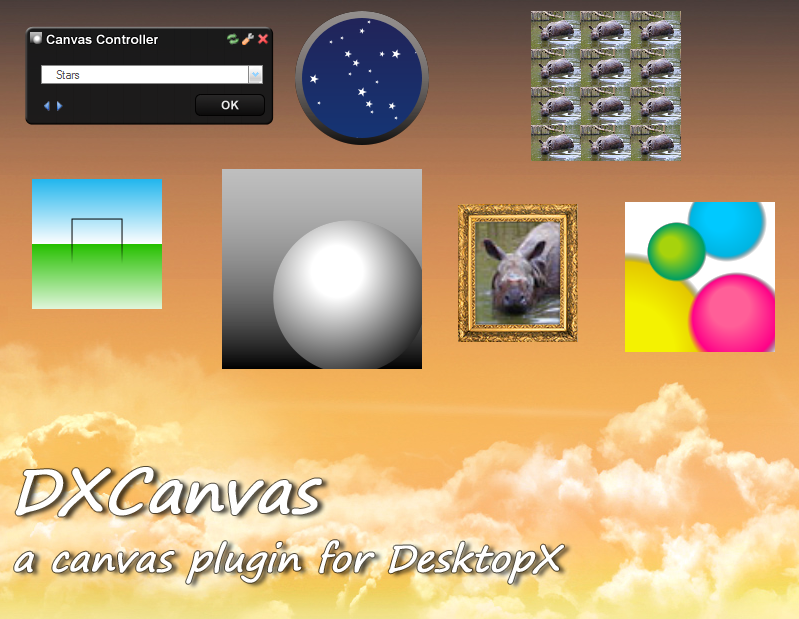
<style>
.page{position:relative;width:799px;height:619px}
.page>*{position:absolute;margin:0}
.t1{font:60px "SegoePrint";color:#ffffff;font-weight:bold;font-style:italic}
.t2{font:36px "SegoePrint";color:#ffffff;font-weight:bold;font-style:italic}
</style>
<div class="page">
<p class="t1" style="left:15px;top:467px;width:307px;height:50px">DXCanvas</p>
<p class="t2" style="left:14px;top:540px;width:550px;height:44px">a canvas plugin for DesktopX</p>
</div>
